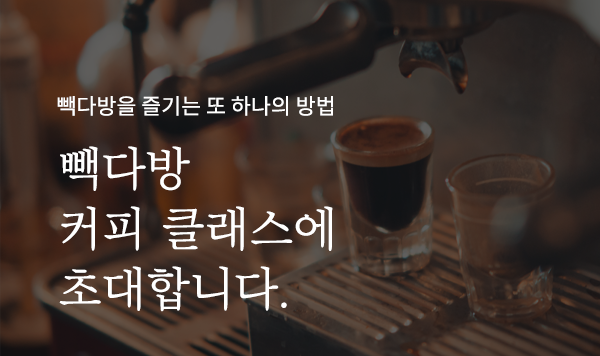
<style>
.page{position:relative;width:600px;height:356px}
.page>*{position:absolute;margin:0}
.t1{font:21.7px "NotoSansKR-Regular";color:#ffffff}
.t2{font:48px/60px "BareunBatangOTFL";color:#ffffff}
</style>
<div class="page">
<p class="t1" style="left:57px;top:96px;width:276px;height:20px">빽다방을 즐기는 또 하나의 방법</p>
<p class="t2" style="left:59px;top:146px;width:274px;height:166px">빽다방<br>커피 클래스에<br>초대합니다.</p>
</div>
